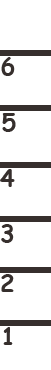
<style>
.page{position:relative;width:51px;height:370px;background:#ffffff}
.page>*{position:absolute;margin:0}
.t1{font:24px "ComicSansMS-Bold";color:#362f2d}
</style>
<div class="page">
<p class="t1" style="left:1px;top:57px;width:14px;height:19px">6</p>
<p class="t1" style="left:2px;top:113px;width:14px;height:19px">5</p>
<p class="t1" style="left:0px;top:169px;width:15px;height:18px">4</p>
<p class="t1" style="left:1px;top:224px;width:13px;height:19px">3</p>
<p class="t1" style="left:1px;top:274px;width:13px;height:18px">2</p>
<p class="t1" style="left:3px;top:327px;width:10px;height:18px">1</p>
</div>
